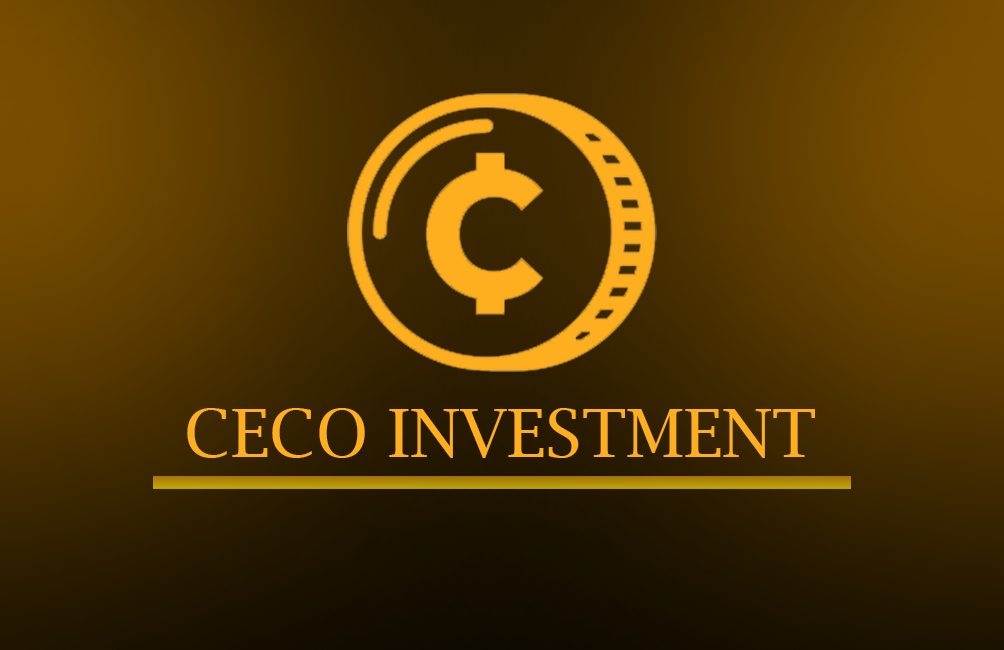
<style>
.page{position:relative;width:1004px;height:650px}
.page>*{position:absolute;margin:0}
.t1{font:67.1px "LucidaBright";color:#fdaf1f}
</style>
<div class="page">
<p class="t1" style="left:187px;top:408px;width:628px;height:50px">CECO INVESTMENT</p>
</div>
